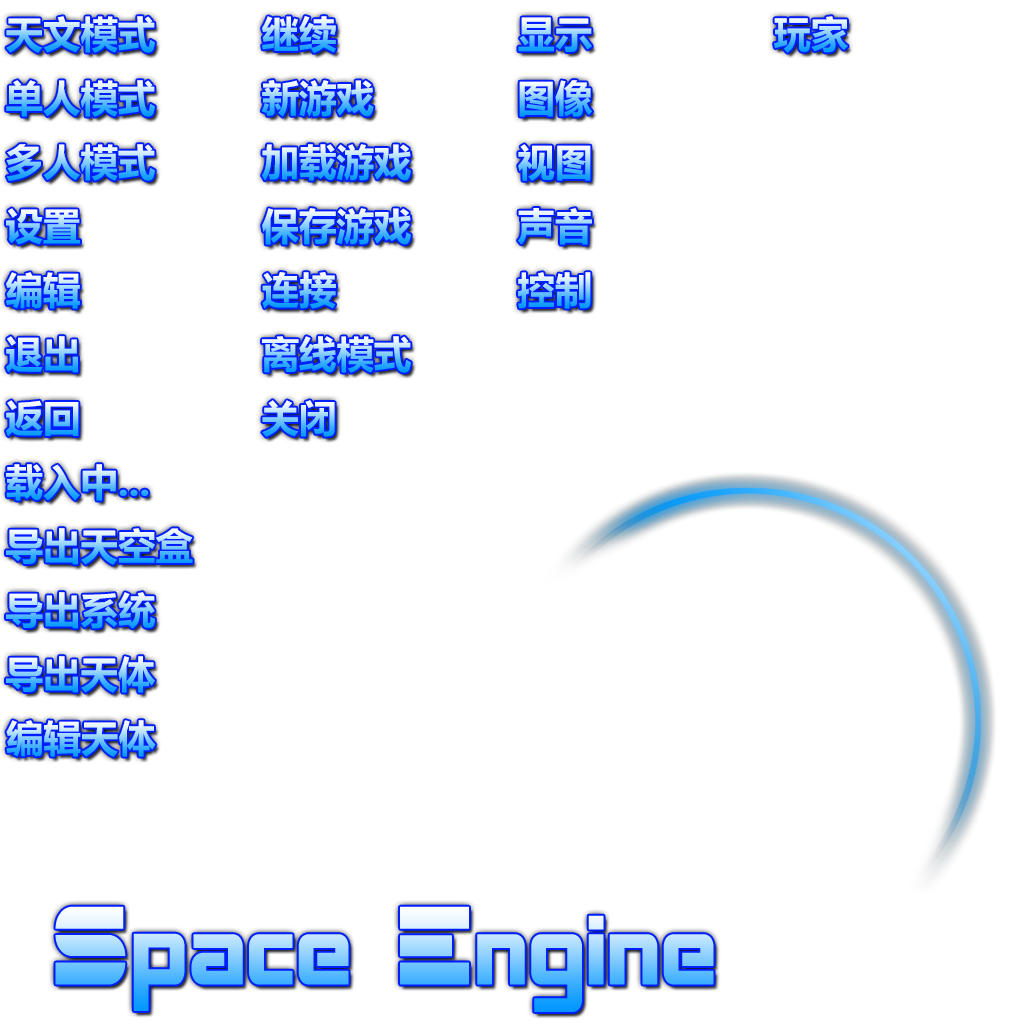
<style>
.page{position:relative;width:1024px;height:1024px;background:#ffffff}
.page>*{position:absolute;margin:0}
.t1{font:37.5px "MicrosoftYaHei-Bold"}
</style>
<div class="page">
<p class="t1" style="left:6px;top:16px;width:149px;height:37px">天文模式</p>
<p class="t1" style="left:262px;top:16px;width:74px;height:37px">继续</p>
<p class="t1" style="left:518px;top:17px;width:74px;height:35px">显示</p>
<p class="t1" style="left:774px;top:16px;width:74px;height:37px">玩家</p>
<p class="t1" style="left:6px;top:80px;width:149px;height:37px">单人模式</p>
<p class="t1" style="left:261px;top:80px;width:113px;height:37px">新游戏</p>
<p class="t1" style="left:519px;top:80px;width:74px;height:37px">图像</p>
<p class="t1" style="left:6px;top:144px;width:149px;height:37px">多人模式</p>
<p class="t1" style="left:262px;top:144px;width:149px;height:37px">加载游戏</p>
<p class="t1" style="left:518px;top:144px;width:73px;height:37px">视图</p>
<p class="t1" style="left:6px;top:208px;width:74px;height:37px">设置</p>
<p class="t1" style="left:262px;top:208px;width:149px;height:37px">保存游戏</p>
<p class="t1" style="left:518px;top:208px;width:74px;height:37px">声音</p>
<p class="t1" style="left:6px;top:272px;width:74px;height:37px">编辑</p>
<p class="t1" style="left:262px;top:272px;width:74px;height:37px">连接</p>
<p class="t1" style="left:518px;top:272px;width:73px;height:37px">控制</p>
<p class="t1" style="left:6px;top:336px;width:72px;height:37px">退出</p>
<p class="t1" style="left:262px;top:336px;width:149px;height:37px">离线模式</p>
<p class="t1" style="left:6px;top:400px;width:73px;height:37px">返回</p>
<p class="t1" style="left:262px;top:400px;width:73px;height:37px">关闭</p>
<p class="t1" style="left:6px;top:464px;width:143px;height:37px">载入中...</p>
<p class="t1" style="left:6px;top:528px;width:187px;height:37px">导出天空盒</p>
<p class="t1" style="left:6px;top:592px;width:149px;height:37px">导出系统</p>
<p class="t1" style="left:6px;top:656px;width:149px;height:37px">导出天体</p>
<p class="t1" style="left:6px;top:720px;width:150px;height:37px">编辑天体</p>
</div>
